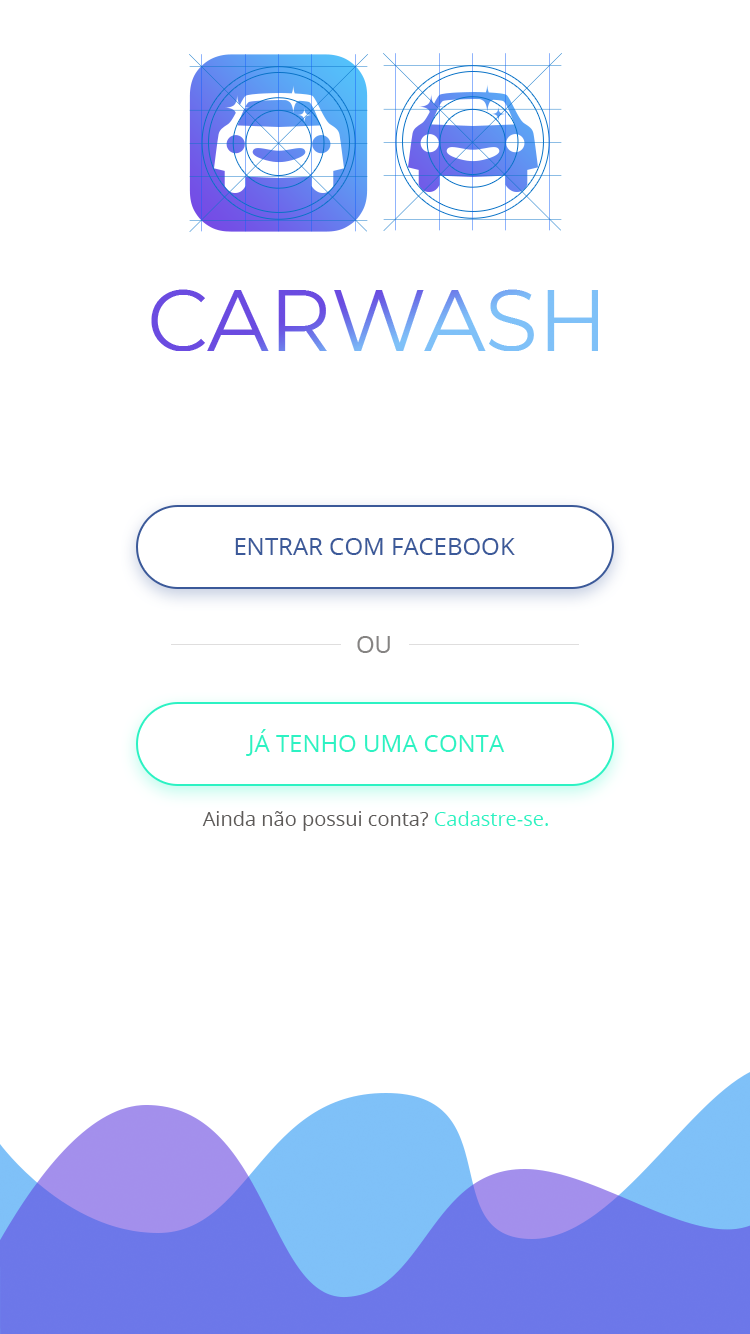
<style>
.page{position:relative;width:750px;height:1334px;background:#ffffff}
.page>*{position:absolute;margin:0}
.t1{font:24px "OpenSans";color:#3b5999}
.t2{font:24px "OpenSans";color:#858382}
.t3{font:24px "OpenSans";color:#2cf2c3}
.t4{font:20px "OpenSans";color:#5d5a58}
.t5{font:20px "OpenSans";color:#2cf2c3}
</style>
<div class="page">
<p class="t1" style="left:235px;top:538px;width:280px;height:17px">ENTRAR COM FACEBOOK</p>
<p class="t2" style="left:357px;top:636px;width:33px;height:17px">OU</p>
<p class="t3" style="left:246px;top:729px;width:259px;height:27px">JÁ TENHO UMA CONTA</p>
<p class="t4" style="left:202px;top:811px;width:346px;height:20px">Ainda não possui conta? <span class="t5">Cadastre-se.</span></p>
</div>
